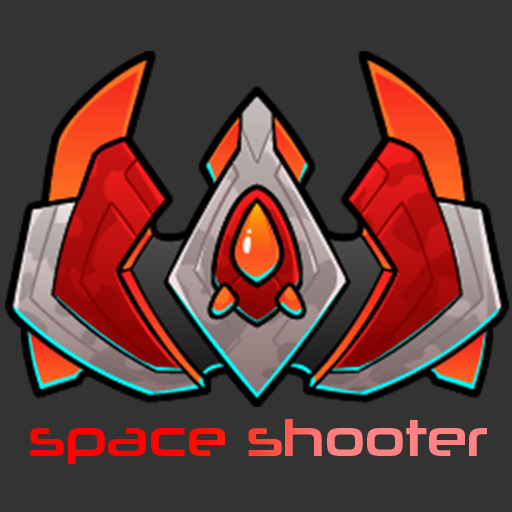
<style>
.page{position:relative;width:512px;height:512px;background:#333333}
.page>*{position:absolute;margin:0}
.t1{font:51.3px "NeuropoliticalRg-Regular";letter-spacing:-0.02em}
</style>
<div class="page">
<p class="t1" style="left:30px;top:419px;width:457px;height:45px">space shooter</p>
</div>
